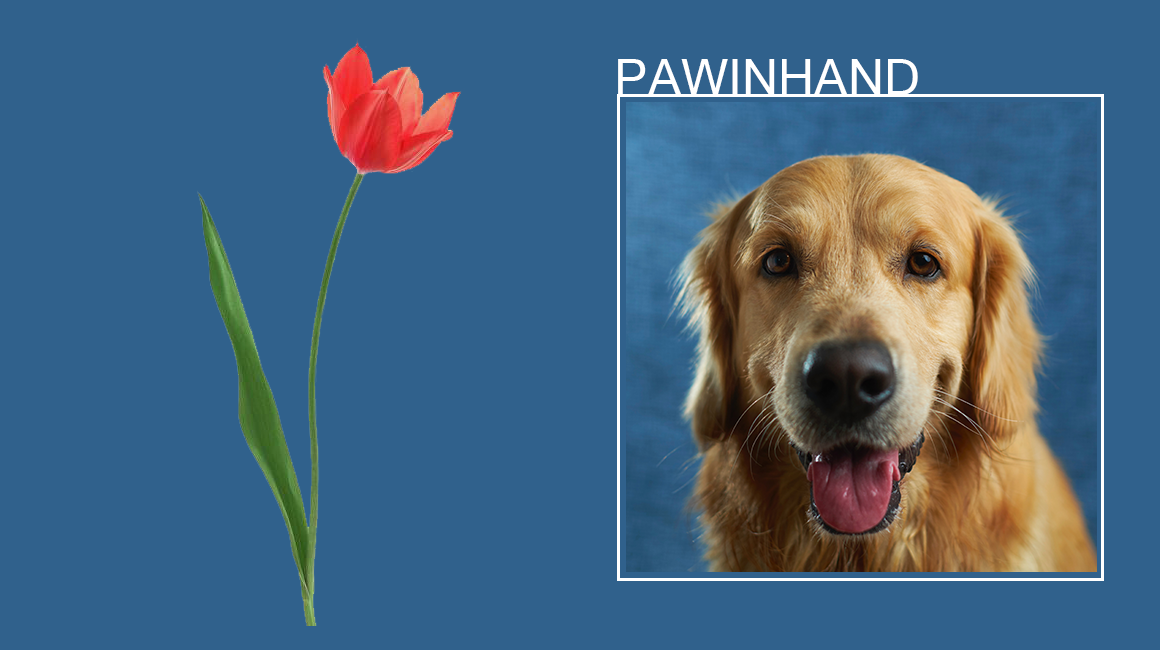
<style>
.page{position:relative;width:1160px;height:650px;background:#30618c}
.page>*{position:absolute;margin:0}
.t1{font:50px "MicrosoftSansSerif";color:#ffffff}
</style>
<div class="page">
<p class="t1" style="left:618px;top:59px;width:300px;height:36px">PAWINHAND</p>
</div>
